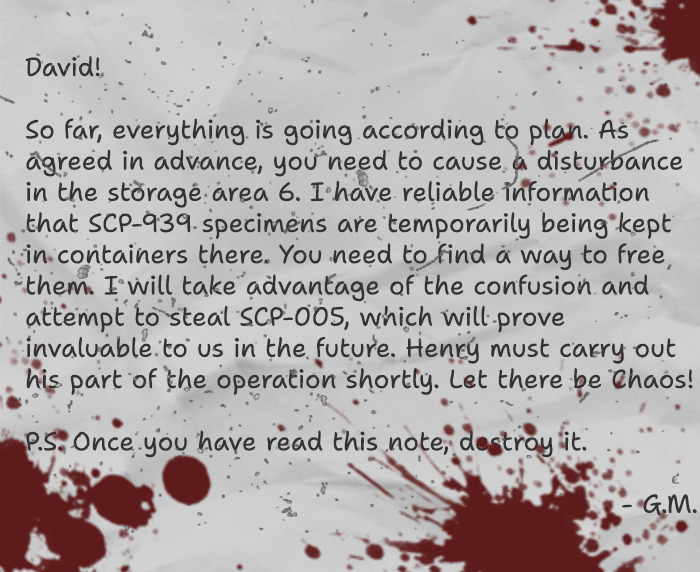
<style>
.page{position:relative;width:700px;height:572px}
.page>*{position:absolute;margin:0}
.t1{font:26px "ShantellSans-Regular";color:#333333}
</style>
<div class="page">
<p class="t1" style="left:25px;top:56px;width:672px;height:460px">David!<br><br>So far, everything is going according to plan. As agreed in advance, you need to cause a disturbance in the storage area 6. I have reliable information that SCP-939 specimens are temporarily being kept in containers there. You need to find a way to free them. I will take advantage of the confusion and attempt to steal SCP-005, which will prove invaluable to us in the future. Henry must carry out his part of the operation shortly. Let there be Chaos!<br><br>P.S. Once you have read this note, destroy it.<br><br>- G.M.</p>
</div>
